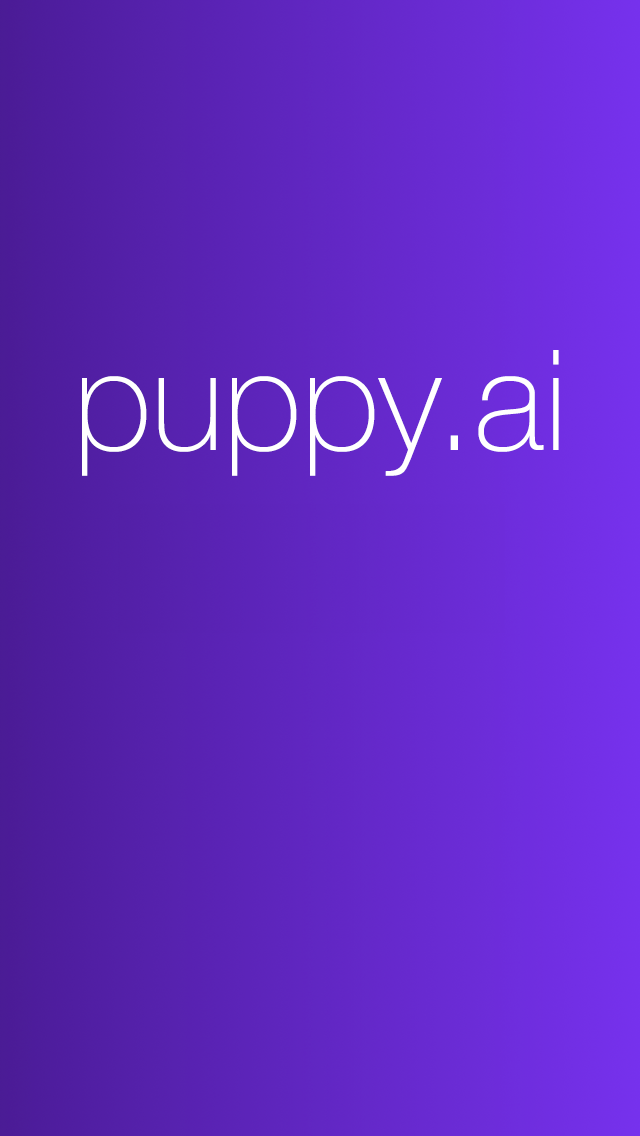
<style>
.page{position:relative;width:640px;height:1136px}
.page>*{position:absolute;margin:0}
.t1{font:140px "HelveticaNeue-Thin";color:#ffffff}
</style>
<div class="page">
<p class="t1" style="left:82px;top:350px;width:477px;height:126px">puppy.ai</p>
</div>
